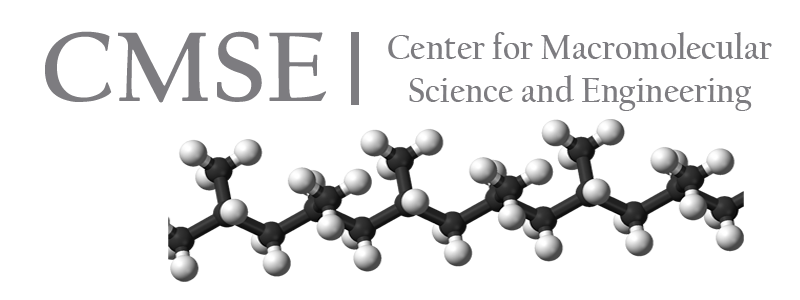
<style>
.page{position:relative;width:800px;height:300px;background:#ffffff}
.page>*{position:absolute;margin:0}
.t1{font:103.4px "CalifornianFB-Bold";color:#7d7c80}
.t2{font:35.6px "CalifornianFB-Bold";color:#7d7c80;scale:0.93 1}
</style>
<div class="page">
<p class="t1" style="left:45px;top:31px;width:281px;height:72px">CMSE</p>
<p class="t2" style="left:388px;top:32px;width:384px;height:79px;text-align:center">Center for Macromolecular Science and Engineering</p>
</div>
